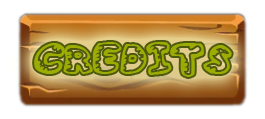
<style>
.page{position:relative;width:265px;height:119px;background:#ffffff}
.page>*{position:absolute;margin:0}
.t1{font:48px "Gwibble";color:#9dac02}
</style>
<div class="page">
<p class="t1" style="left:34px;top:42px;width:198px;height:35px">credits</p>
</div>
